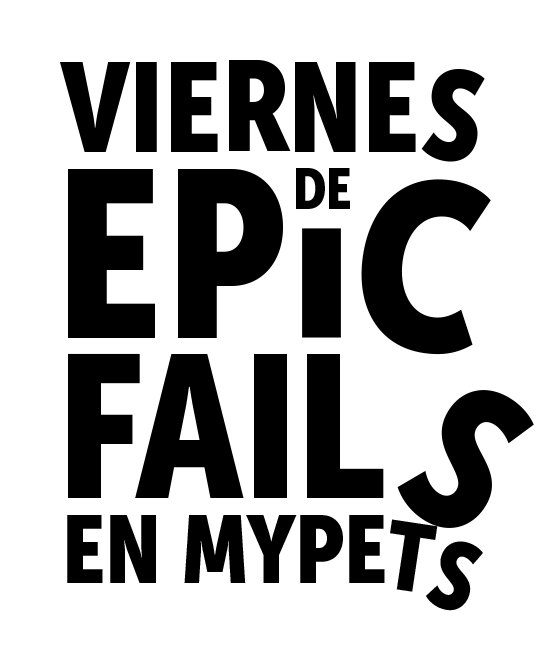
<style>
.page{position:relative;width:550px;height:660px;background:#ffffff}
.page>*{position:absolute;margin:0}
.t1{font:126.5px "MuseoSansCond-900";color:#000000;text-transform:uppercase}
.t2{font:126.7px "MuseoSansCond-900";color:#000000;text-transform:uppercase}
.t3{font:236.5px "MuseoSansCond-900";color:#000000;text-transform:uppercase}
.t4{font:57.1px "MuseoSansCond-900";color:#000000;text-transform:uppercase}
.t5{font:201.3px "MuseoSansCond-900";color:#000000;text-transform:uppercase}
.t6{font:95.7px "MuseoSansCond-900";color:#000000;text-transform:uppercase}
</style>
<div class="page">
<p class="t1" style="left:59px;top:62px;width:159px;height:90px">Vie</p>
<p class="t2" style="left:229px;top:60px;width:62px;height:91px">R</p>
<p class="t1" style="left:295px;top:62px;width:121px;height:90px">NE</p>
<p class="t1" style="left:421px;top:69px;width:64px;height:93px;rotate:8deg">S</p>
<p class="t3" style="left:68px;top:169px;width:87px;height:169px">E</p>
<p class="t3" style="left:178px;top:169px;width:105px;height:169px">P</p>
<p class="t4" style="left:296px;top:168px;width:54px;height:41px">DE</p>
<p class="t3" style="left:361px;top:179px;width:130px;height:176px;rotate:8deg">C</p>
<p class="t5" style="left:68px;top:353px;width:72px;height:145px">F</p>
<p class="t5" style="left:135px;top:354px;width:109px;height:144px">A</p>
<p class="t5" style="left:307px;top:354px;width:77px;height:144px">L</p>
<p class="t5" style="left:397px;top:390px;width:137px;height:138px;rotate:31deg">S</p>
<p class="t6" style="left:67px;top:515px;width:318px;height:68px">en mype</p>
<p class="t6" style="left:390px;top:519px;width:48px;height:73px;rotate:9deg">T</p>
<p class="t6" style="left:426px;top:541px;width:57px;height:70px;rotate:19deg">S</p>
</div>
